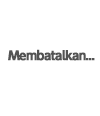
<style>
.page{position:relative;width:100px;height:116px;background:#ffffff}
.page>*{position:absolute;margin:0}
.t1{font:12px "UDShinGoPro-Bold";letter-spacing:-0.08em;color:#535353;font-weight:bold}
</style>
<div class="page">
<p class="t1" style="left:8px;top:49px;width:87px;height:12px">Membatalkan...</p>
</div>
